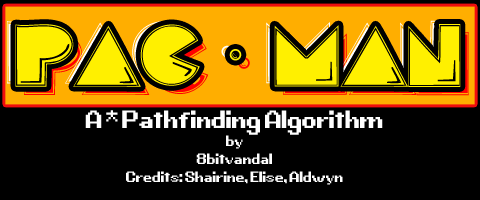
<style>
.page{position:relative;width:480px;height:200px;background:#000000}
.page>*{position:absolute;margin:0}
.t1{font:63.2px "PacFont";letter-spacing:-0.025em;color:#fff000}
.t2{font:18px/18px "G.B.BOOT";letter-spacing:-0.025em;color:#fefefe}
.t3{font:30px/18px "G.B.BOOT";letter-spacing:-0.025em;color:#fefefe}
</style>
<div class="page">
<p class="t1" style="left:15px;top:24px;width:446px;height:63px">pac - man</p>
<p class="t2" style="left:85px;top:110px;width:298px;height:75px;text-align:center"><span class="t3">A * Pathfinding Algorithm<br></span>by<br>8bitvandal<br>Credits: Shairine, Elise, Aldwyn</p>
</div>
